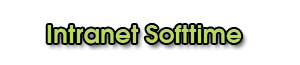
<style>
.page{position:relative;width:300px;height:65px;background:#ffffff}
.page>*{position:absolute;margin:0}
.t1{font:25px "AvantGarde-Demi";color:#bad868}
</style>
<div class="page">
<p class="t1" style="left:47px;top:25px;width:195px;height:19px">Intranet Softtime</p>
</div>
